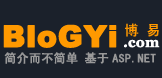
<style>
.page{position:relative;width:162px;height:78px;background:#1b212b}
.page>*{position:absolute;margin:0}
.t1{font:30px "Arial-Black";color:#ff9900;font-weight:bold}
.t2{font:14px "SimHei";color:#ff9900;font-weight:bold}
.t3{font:14px "Georgia-Bold";color:#ffffff;font-weight:bold}
.t4{font:14px "Georgia-Bold";color:#ffffff;font-weight:bold;font-style:italic}
.t5{font:12px "SimHei";color:#999999;font-weight:bold}
</style>
<div class="page">
<p class="t1" style="left:3px;top:24px;width:114px;height:24px">BloGYi</p>
<p class="t2" style="left:125px;top:23px;width:34px;height:14px">博 易</p>
<p class="t3" style="left:124px;top:39px;width:36px;height:9px"><span class="t4">.</span>com</p>
<p class="t5" style="left:4px;top:52px;width:152px;height:12px">简介而不简单 基于ASP.NET</p>
</div>
